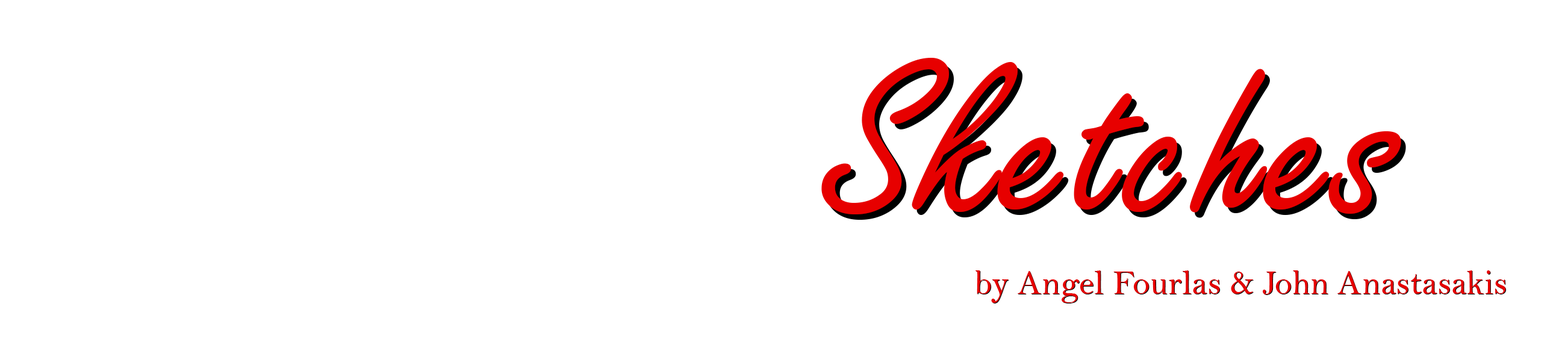
<style>
.page{position:relative;width:1568px;height:342px;background:#ffffff}
.page>*{position:absolute;margin:0}
.t1{font:240.9px "FreestyleScript-Regular";color:#e70000}
.t2{font:35.1px "BellMT";color:#e70000}
</style>
<div class="page">
<p class="t1" style="left:821px;top:58px;width:580px;height:156px">Sketches</p>
<p class="t2" style="left:975px;top:270px;width:531px;height:33px">by Angel Fourlas &amp; John Anastasakis</p>
</div>
